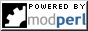
<style>
.page{position:relative;width:88px;height:31px;background:#ffffff}
.page>*{position:absolute;margin:0}
.t1{font:8px "Silkscreen";color:#000000}
</style>
<div class="page">
<p class="t1" style="left:29px;top:4px;width:56px;height:5px">powered by</p>
</div>
